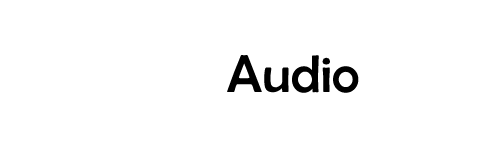
<style>
.page{position:relative;width:500px;height:150px;background:#ffffff}
.page>*{position:absolute;margin:0}
.t1{font:52.9px "BerlinSansFB-Reg";color:#000000}
</style>
<div class="page">
<p class="t1" style="left:227px;top:55px;width:132px;height:38px">Audio</p>
</div>
